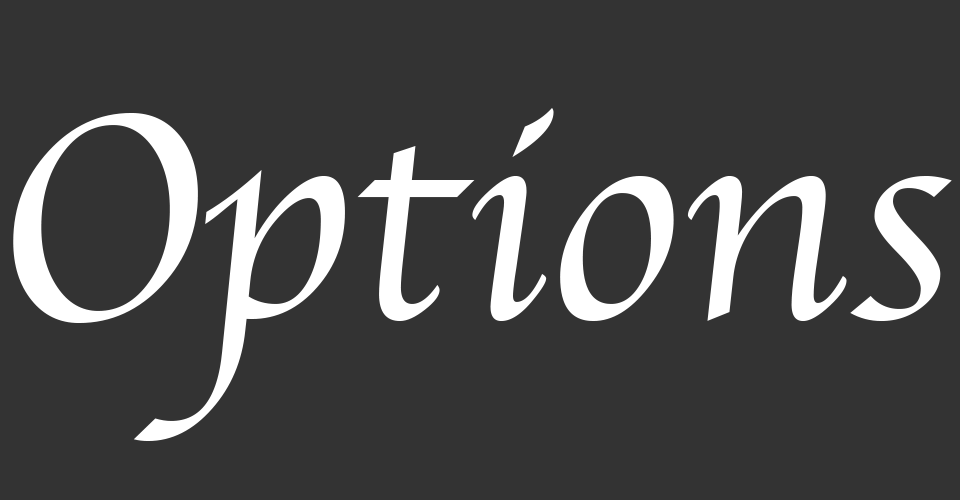
<style>
.page{position:relative;width:960px;height:500px;background:#333333}
.page>*{position:absolute;margin:0}
.t1{font:301.7px "Apple-Chancery";color:#ffffff}
</style>
<div class="page">
<p class="t1" style="left:13px;top:108px;width:939px;height:333px">Options</p>
</div>
